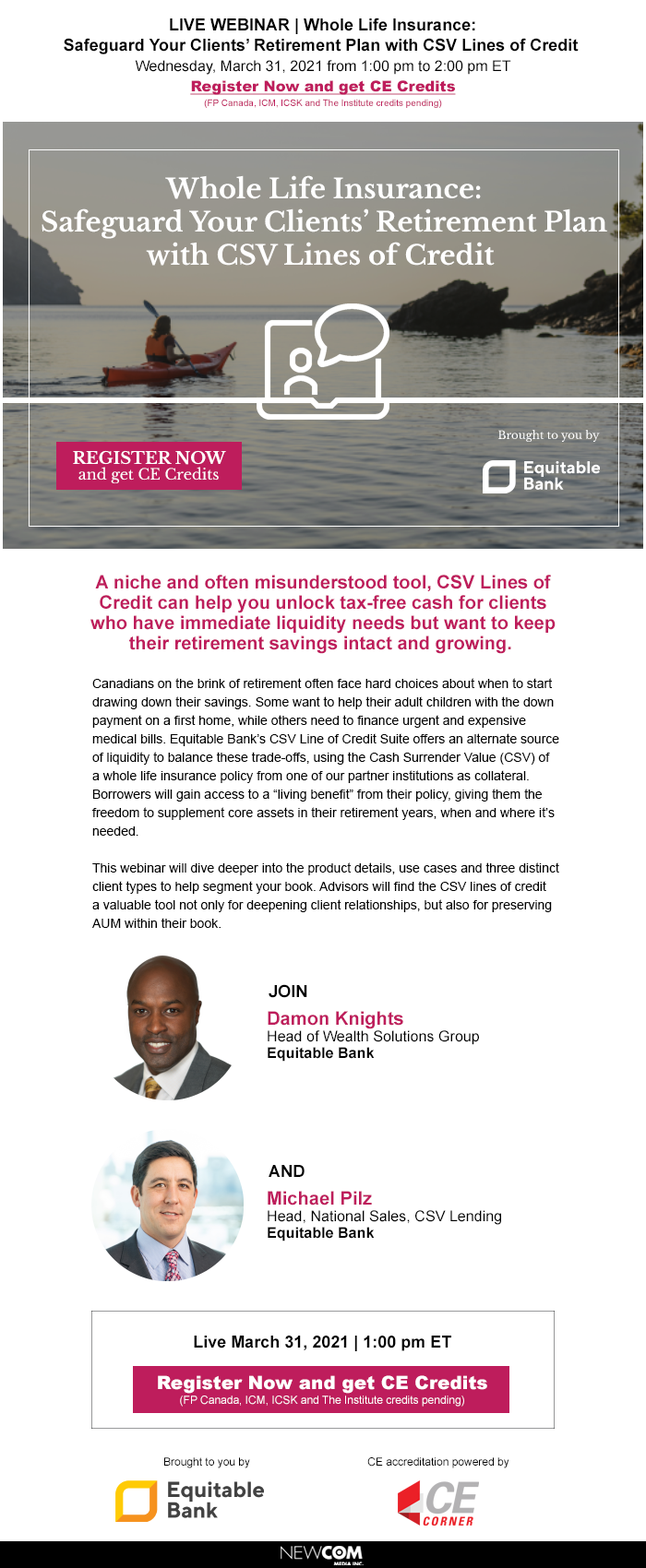
<style>
.page{position:relative;width:646px;height:1568px;background:#ffffff}
.page>*{position:absolute;margin:0}
.t1{font:16.6px/20.3px "Arial-BoldMT";color:#000000}
.t2{font:16.6px/22.1px "Arial-BoldMT";color:#000000}
.t3{font:14.8px/20.3px "ArialMT";color:#000000}
.t4{font:14.8px/20.3px "Arial-Black";color:#be1d5c;text-decoration:underline}
.t5{font:9.2px/14.8px "ArialMT";color:#be1d5c}
.t6{font:26.7px/33.2px "LibreBaskerville-Bold";color:#ffffff}
.t7{font:10.9px "LibreBaskerville-Regular";color:#ffffff}
.t8{font:14.8px/15.7px "LibreBaskerville-Regular";color:#ffffff}
.t9{font:16.6px/15.7px "LibreBaskerville-Bold";color:#ffffff}
.t10{font:18.4px/20.3px "Arial-BoldMT";color:#be1d5c}
.t11{font:12.9px/18.4px "ArialMT";color:#000000}
.t12{font:16.6px "Arial-BoldMT";color:#000000}
.t13{font:14.8px/16.5px "ArialMT";color:#000000}
.t14{font:14.8px/16.5px "Arial-BoldMT";color:#000000}
.t15{font:18.4px/16.5px "Arial-BoldMT";color:#be1d5c}
.t16{font:11.1px/14.8px "ArialMT";color:#ffffff}
.t17{font:18.4px/12.9px "Arial-Black";color:#ffffff}
.t18{font:11.1px "ArialMT";color:#000000}
</style>
<div class="page">
<p class="t1" style="left:64px;top:18px;width:514px;height:90px;text-align:center"><span class="t2">LIVE WEBINAR</span> | Whole Life Insurance:<br>Safeguard Your Clients’ Retirement Plan with CSV Lines of Credit <br><span class="t3">Wednesday, March 31, 2021 from 1:00 pm to 2:00 pm ET<br></span><span class="t4">Register Now and get CE Credits<br></span><span class="t5">(FP Canada, ICM, ICSK and The Institute credits pending)</span></p>
<p class="t6" style="left:42px;top:175px;width:565px;height:91px;text-align:center">Whole Life Insurance:<br>Safeguard Your Clients’ Retirement Plan<br>with CSV Lines of Credit</p>
<p class="t7" style="left:498px;top:430px;width:102px;height:12px">Brought to you by</p>
<p class="t8" style="left:73px;top:450px;width:153px;height:34px;text-align:center"><span class="t9">REGISTER NOW<br></span>and get CE Credits</p>
<p class="t10" style="left:90px;top:575px;width:465px;height:79px;text-align:center">A niche and often misunderstood tool, CSV Lines of<br>Credit can help you unlock tax-free cash for clients<br>who have immediate liquidity needs but want to keep<br>their retirement savings intact and growing.</p>
<p class="t11" style="left:92px;top:678px;width:467px;height:250px">Canadians on the brink of retirement often face hard choices about when to start<br>drawing down their savings. Some want to help their adult children with the down<br>payment on a first home, while others need to finance urgent and expensive<br>medical bills. Equitable Bank’s CSV Line of Credit Suite offers an alternate source<br>of liquidity to balance these trade-offs, using the Cash Surrender Value (CSV) of<br>a whole life insurance policy from one of our partner institutions as collateral.<br>Borrowers will gain access to a “living benefit” from their policy, giving them the<br>freedom to supplement core assets in their retirement years, when and where it’s<br>needed.<br><br>This webinar will dive deeper into the product details, use cases and three distinct<br>client types to help segment your book. Advisors will find the CSV lines of credit<br>a valuable tool not only for deepening client relationships, but also for preserving<br>AUM within their book.</p>
<p class="t12" style="left:268px;top:984px;width:39px;height:14px">JOIN</p>
<p class="t13" style="left:267px;top:1011px;width:212px;height:51px"><span class="t14"><br><br></span><span class="t15">Damon Knights<br></span>Head of Wealth Solutions Group<br><span class="t14">Equitable Bank</span></p>
<p class="t12" style="left:268px;top:1165px;width:36px;height:12px">AND</p>
<p class="t13" style="left:267px;top:1191px;width:234px;height:50px"><span class="t14"><br><br></span><span class="t15">Michael Pilz<br></span>Head, National Sales, CSV Lending<br><span class="t14">Equitable Bank</span></p>
<p class="t12" style="left:194px;top:1336px;width:257px;height:15px">Live March 31, 2021 | 1:00 pm ET</p>
<p class="t16" style="left:158px;top:1375px;width:329px;height:32px;text-align:center"><span class="t17">Register Now and get CE Credits<br></span>(FP Canada, ICM, ICSK and The Institute credits pending)</p>
<p class="t18" style="left:164px;top:1457px;width:86px;height:11px">Brought to you by</p>
<p class="t18" style="left:367px;top:1457px;width:142px;height:11px">CE accreditation powered by</p>
</div>
